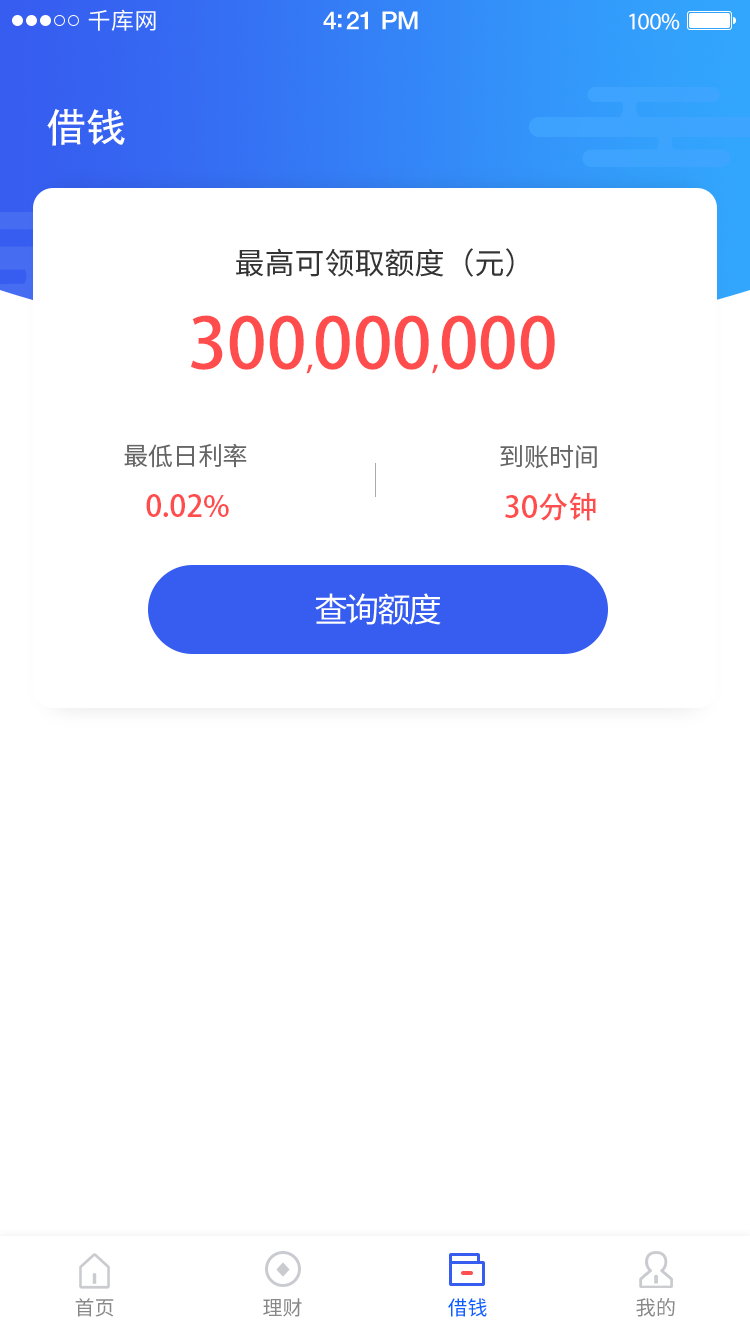
<style>
.page{position:relative;width:750px;height:1334px;background:#ffffff}
.page>*{position:absolute;margin:0}
.t1{font:23px "SourceHanSansCN-Regular";letter-spacing:0.02em;color:#ffffff}
.t2{font:25px "HelveticaNeue-Medium";letter-spacing:-0.02em;color:#ffffff}
.t3{font:24px "MyriadPro-Regular";letter-spacing:-0.02em;color:#ffffff}
.t4{font:40px "AdobeHeitiStd-Regular";color:#ffffff}
.t5{font:30px "SourceHanSansCN-Regular";color:#333333}
.t6{font:70px "AdobeHeitiStd-Regular";color:#ff4c4c}
.t7{font:30px "AdobeHeitiStd-Regular";color:#ff4c4c}
.t8{font:25px "SourceHanSansCN-Normal";color:#666666}
.t9{font:25.2px "SourceHanSansCN-Normal";color:#666666}
.t10{font:30.2px "AdobeHeitiStd-Regular";color:#ff4c4c}
.t11{font:34px "SourceHanSansCN-Regular";letter-spacing:-0.075em;color:#ffffff}
.t12{font:20px "SourceHanSansCN-Regular";color:#888888}
.t13{font:20px "SourceHanSansCN-Regular";color:#0f5dff}
.t14{font:20.3px "SourceHanSansCN-Regular";color:#888888}
</style>
<div class="page">
<p class="t1" style="left:88px;top:9px;width:68px;height:22px">千库网</p>
<p class="t2" style="left:323px;top:11px;width:95px;height:19px">4:21 PM</p>
<p class="t3" style="left:629px;top:13px;width:51px;height:17px">100%</p>
<p class="t4" style="left:47px;top:108px;width:78px;height:38px">借钱</p>
<p class="t5" style="left:236px;top:248px;width:278px;height:29px">最高可领取额度（元）</p>
<p class="t6" style="left:191px;top:315px;width:364px;height:59px">300<span class="t7">,</span>000<span class="t7">,</span>000</p>
<p class="t8" style="left:124px;top:443px;width:123px;height:25px">最低日利率</p>
<p class="t9" style="left:500px;top:445px;width:97px;height:24px">到账时间</p>
<p class="t7" style="left:146px;top:494px;width:83px;height:24px">0.02%</p>
<p class="t10" style="left:505px;top:492px;width:91px;height:29px">30分钟</p>
<p class="t11" style="left:315px;top:593px;width:126px;height:32px">查询额度</p>
<p class="t12" style="left:75px;top:1298px;width:39px;height:19px">首页</p>
<p class="t12" style="left:263px;top:1298px;width:39px;height:19px">理财</p>
<p class="t13" style="left:448px;top:1298px;width:39px;height:19px">借钱</p>
<p class="t14" style="left:636px;top:1298px;width:39px;height:19px">我的</p>
</div>
